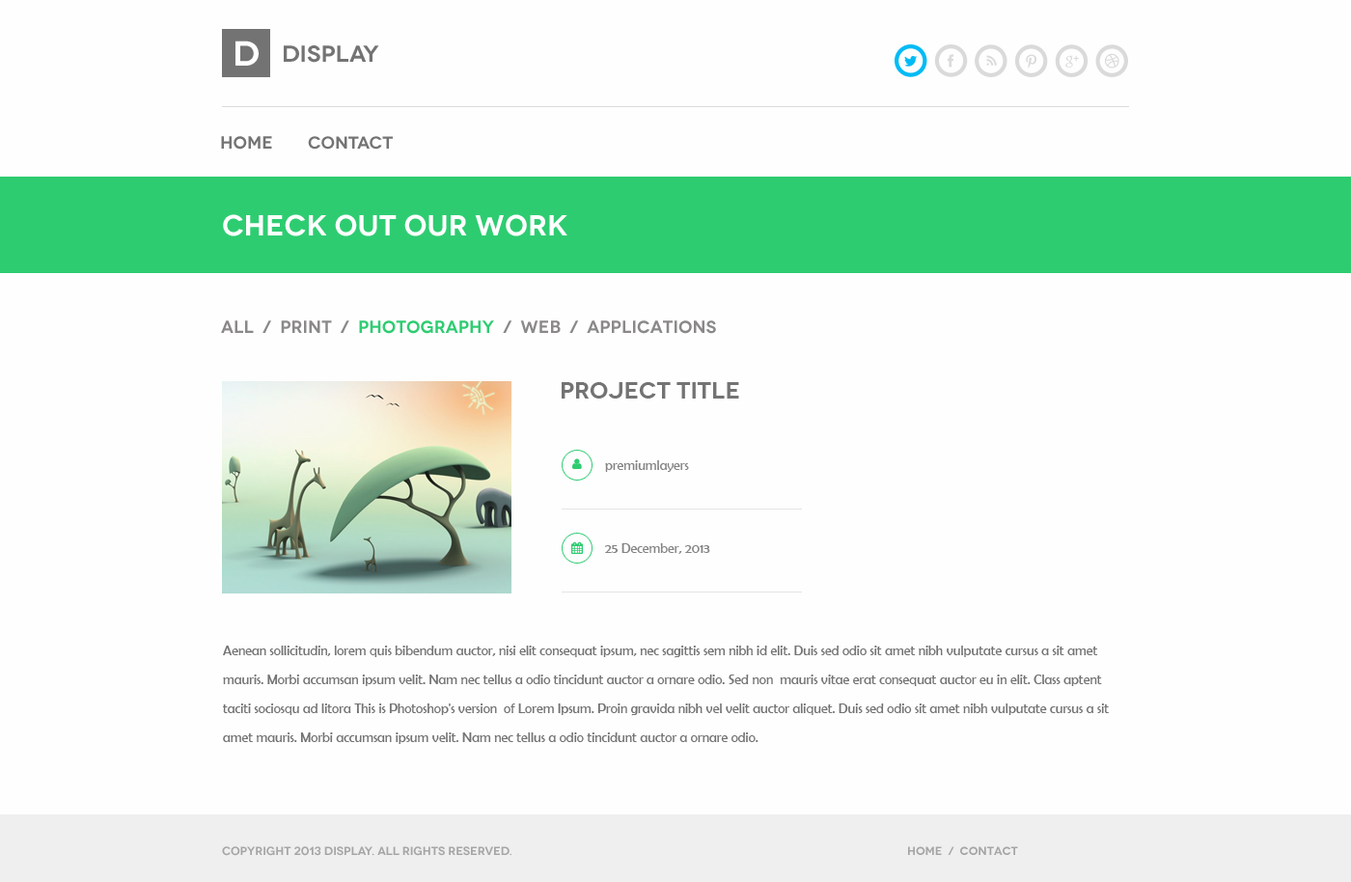
<style>
.page{position:relative;width:1351px;height:882px;background:#fefefe}
.page>*{position:absolute;margin:0}
.t1{font:34.8px "Novecentowide-DemiBold";color:#ffffff}
.t2{font:23.2px "Novecentowide-DemiBold";color:#737373}
.t3{font:17.4px "Novecentowide-DemiBold";color:#737373}
.t4{font:29px "Novecentowide-DemiBold";color:#ffffff}
.t5{font:17.4px "Novecentowide-DemiBold";color:#8a8888}
.t6{font:17.4px "Novecentowide-DemiBold";color:#2ecc71}
.t7{font:13.5px "BerlinSansFB-Reg";color:#848484}
.t8{font:13.5px/29px "BerlinSansFB-Reg";color:#737373}
.t9{font:11.6px "Novecentowide-DemiBold";color:#a5a5a5;text-transform:uppercase}
</style>
<div class="page">
<p class="t1" style="left:236px;top:41px;width:23px;height:25px">D</p>
<p class="t2" style="left:284px;top:45px;width:95px;height:18px">Display</p>
<p class="t3" style="left:221px;top:136px;width:51px;height:14px">Home</p>
<p class="t3" style="left:308px;top:136px;width:85px;height:14px">Contact</p>
<p class="t4" style="left:223px;top:214px;width:345px;height:23px">Check Out Our work</p>
<p class="t5" style="left:221px;top:320px;width:495px;height:14px">All  /  Print  /  <span class="t6">Photography </span> /  Web  /  Applications</p>
<p class="t2" style="left:562px;top:382px;width:177px;height:17px">Project Title</p>
<p class="t7" style="left:605px;top:460px;width:84px;height:12px">premiumlayers</p>
<p class="t7" style="left:605px;top:543px;width:105px;height:11px">25 December, 2013</p>
<p class="t8" style="left:223px;top:646px;width:886px;height:98px">Aenean sollicitudin, lorem quis bibendum auctor, nisi elit consequat ipsum, nec sagittis sem nibh id elit. Duis sed odio sit amet nibh vulputate cursus a sit amet mauris. Morbi accumsan ipsum velit. Nam nec tellus a odio tincidunt auctor a ornare odio. Sed non  mauris vitae erat consequat auctor eu in elit. Class aptent taciti sociosqu ad litora This is Photoshop's version  of Lorem Ipsum. Proin gravida nibh vel velit auctor aliquet. Duis sed odio sit amet nibh vulputate cursus a sit amet mauris. Morbi accumsan ipsum velit. Nam nec tellus a odio tincidunt auctor a ornare odio.</p>
<p class="t9" style="left:222px;top:847px;width:290px;height:9px">Copyright 2013 Display. All Rights Reserved.</p>
<p class="t9" style="left:908px;top:847px;width:110px;height:8px">Home  /  Contact</p>
</div>
